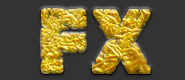
<style>
.page{position:relative;width:185px;height:80px;background:#333333}
.page>*{position:absolute;margin:0}
.t1{font:80px "JFRockSolid"}
</style>
<div class="page">
<p class="t1" style="left:40px;top:8px;width:111px;height:66px">FX</p>
</div>
